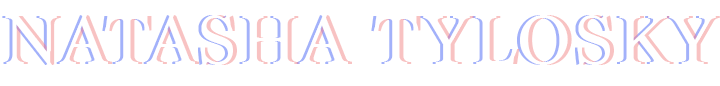
<style>
.page{position:relative;width:720px;height:86px;background:#ffffff}
.page>*{position:absolute;margin:0}
.t1{font:71.9px "Marion-Regular";letter-spacing:0.04em}
</style>
<div class="page">
<p class="t1" style="left:2px;top:15px;width:711px;height:50px">NATASHA TYLOSKY</p>
<p class="t1" style="left:9px;top:15px;width:711px;height:50px">NATASHA TYLOSKY</p>
</div>
